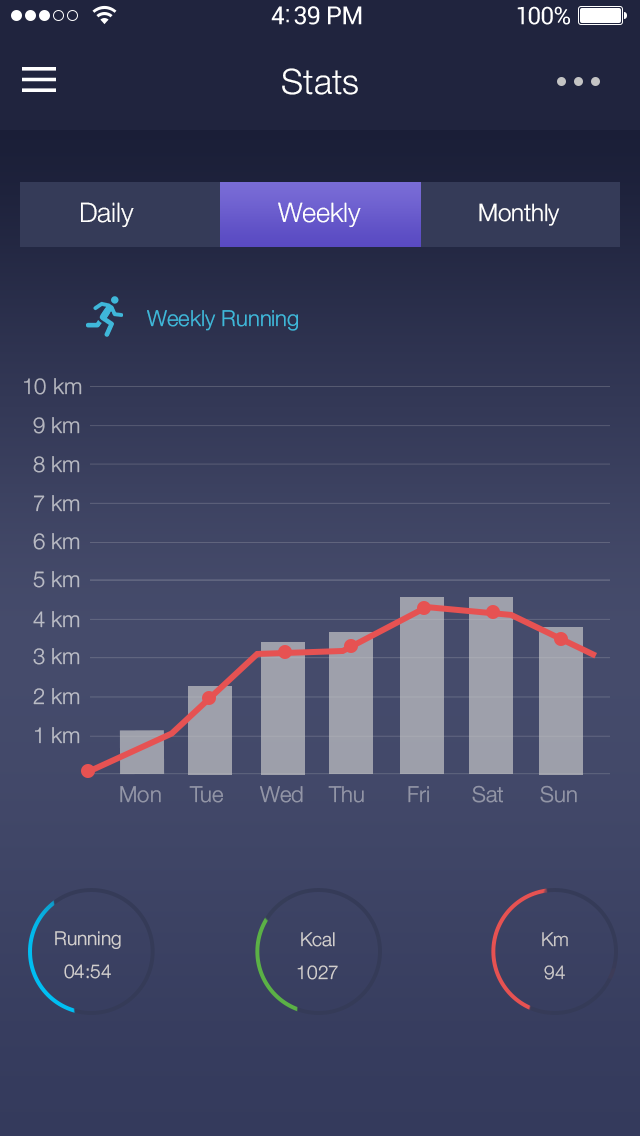
<style>
.page{position:relative;width:640px;height:1136px}
.page>*{position:absolute;margin:0}
.t1{font:35px "HelveticaNeue-Light";color:#ffffff}
.t2{font:27px "HelveticaNeue-Light";color:#ffffff}
.t3{font:24px "HelveticaNeue-Light";color:#ffffff}
.t4{font:22px "HelveticaNeue-Light";color:#3fb7d9}
.t5{font:22px "HelveticaNeue-Light";color:#b3b5be}
.t6{font:22px "HelveticaNeue-Light";color:#b4b5bf}
.t7{font:22px "HelveticaNeue-Light";color:#b5b7c1}
.t8{font:22px "HelveticaNeue-Light";color:#b6b8c2}
.t9{font:22px "HelveticaNeue-Light";color:#b8b9c4}
.t10{font:22px "HelveticaNeue-Light";color:#b8bac5}
.t11{font:22px "HelveticaNeue-Light";color:#b9bbc5}
.t12{font:22px "HelveticaNeue-Light";color:#9295a6}
.t13{font:19px/33px "HelveticaNeue-Light";color:#d1cece}
</style>
<div class="page">
<p class="t1" style="left:282px;top:68px;width:76px;height:27px">Stats</p>
<p class="t2" style="left:81px;top:202px;width:53px;height:26px">Daily</p>
<p class="t2" style="left:278px;top:202px;width:83px;height:26px">Weekly</p>
<p class="t3" style="left:479px;top:203px;width:81px;height:23px">Monthly</p>
<p class="t4" style="left:147px;top:310px;width:151px;height:21px">Weekly Running</p>
<p class="t5" style="left:24px;top:378px;width:58px;height:17px">10 km</p>
<p class="t6" style="left:33px;top:417px;width:47px;height:17px">9 km</p>
<p class="t7" style="left:33px;top:456px;width:47px;height:17px">8 km</p>
<p class="t8" style="left:34px;top:495px;width:46px;height:17px">7 km</p>
<p class="t9" style="left:33px;top:533px;width:47px;height:17px">6 km</p>
<p class="t10" style="left:33px;top:571px;width:47px;height:17px">5 km</p>
<p class="t11" style="left:33px;top:611px;width:47px;height:17px">4 km</p>
<p class="t11" style="left:33px;top:648px;width:47px;height:17px">3 km</p>
<p class="t11" style="left:33px;top:688px;width:47px;height:17px">2 km</p>
<p class="t11" style="left:35px;top:727px;width:45px;height:17px">1 km</p>
<p class="t12" style="left:472px;top:785px;width:31px;height:18px">Sat</p>
<p class="t12" style="left:540px;top:785px;width:37px;height:18px">Sun</p>
<p class="t12" style="left:120px;top:786px;width:41px;height:17px">Mon</p>
<p class="t12" style="left:189px;top:786px;width:34px;height:17px">Tue</p>
<p class="t12" style="left:260px;top:786px;width:43px;height:17px">Wed</p>
<p class="t12" style="left:328px;top:786px;width:36px;height:17px">Thu</p>
<p class="t12" style="left:408px;top:786px;width:21px;height:17px">Fri</p>
<p class="t13" style="left:55px;top:931px;width:66px;height:48px;text-align:center">Running<br>04:54</p>
<p class="t13" style="left:297px;top:932px;width:41px;height:48px;text-align:center">Kcal<br>1027</p>
<p class="t13" style="left:542px;top:932px;width:26px;height:48px;text-align:center;opacity:0.94">Km<br>94</p>
</div>
